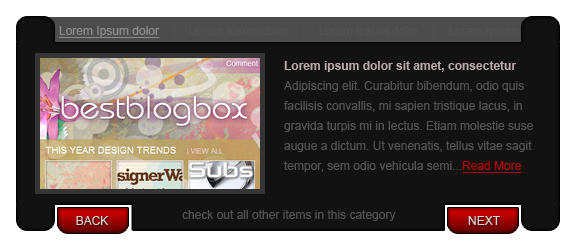
<style>
.page{position:relative;width:576px;height:251px;background:#121212}
.page>*{position:absolute;margin:0}
.t1{font:12px "ArialMT";color:#535151}
.t2{font:12px "ArialMT";color:#8e8c8c;text-decoration:underline}
.t3{font:12px/20px "ArialMT";color:#535151}
.t4{font:12px/20px "Arial-BoldMT";color:#baabab}
.t5{font:12px/20px "ArialMT";color:#b00202;text-decoration:underline}
.t6{font:12px "ArialMT";color:#d5d5d5}
</style>
<div class="page">
<p class="t1" style="left:59px;top:26px;width:459px;height:12px"><span class="t2">Lorem Ipsum dolor</span>    |    Lorem Ipsum dolor    |    Lorem Ipsum dolor    |    Lorem Ipsum</p>
<p class="t3" style="left:284px;top:61px;width:249px;height:112px"><span class="t4">Lorem ipsum dolor sit amet, consectetur<br></span>Adipiscing elit. Curabitur bibendum, odio quis<br>facilisis convallis, mi sapien tristique lacus, in<br>gravida turpis mi in lectus. Etiam molestie suse<br>augue a dictum. Ut venenatis, tellus vitae sagit<br>tempor, sem odio vehicula semi...<span class="t5">Read More</span></p>
<p class="t6" style="left:76px;top:216px;width:33px;height:9px">BACK</p>
<p class="t1" style="left:182px;top:210px;width:214px;height:11px">check out all other items in this category</p>
<p class="t6" style="left:468px;top:216px;width:32px;height:9px">NEXT</p>
</div>
